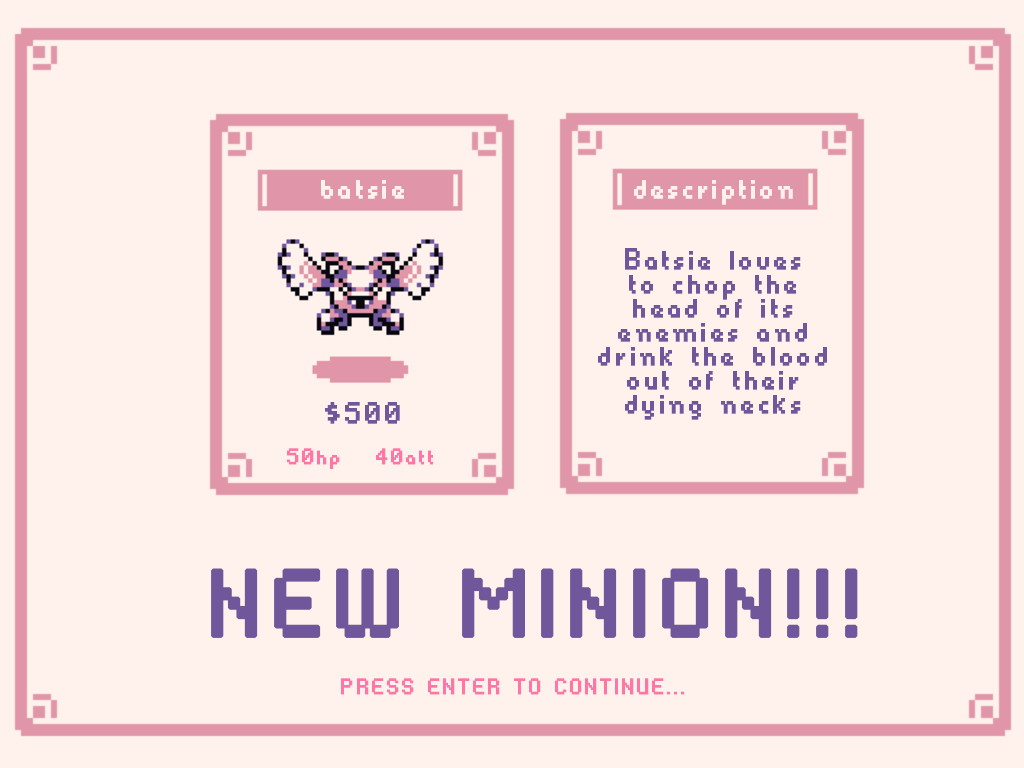
<style>
.page{position:relative;width:1024px;height:768px;background:#fff1eb}
.page>*{position:absolute;margin:0}
.t1{font:48px "HeartbitXX2Px";color:#fff1eb;font-weight:bold;scale:0.9 1}
.t2{font:48px/24px "HeartbitXX2Px";color:#70579c;font-weight:bold;scale:0.9 1}
.t3{font:48px "HeartbitXX2Px";color:#70579c;font-weight:bold;scale:0.9 1}
.t4{font:36px "HeartbitXX2Px";color:#ff76a6;font-weight:bold;scale:0.9 1}
.t5{font:150px "HeartbitXX2Px";color:#70579c;font-weight:bold;scale:0.9 1}
</style>
<div class="page">
<p class="t1" style="left:321px;top:180px;width:83px;height:19px">batsie</p>
<p class="t1" style="left:634px;top:180px;width:159px;height:25px">description</p>
<p class="t2" style="left:598px;top:248px;width:229px;height:172px;text-align:center">Batsie loves<br>to chop the<br>head of its<br>enemies and<br>drink the blood<br>out of their<br>dying necks</p>
<p class="t3" style="left:325px;top:402px;width:75px;height:22px">$500</p>
<p class="t4" style="left:287px;top:448px;width:146px;height:21px">50hp   40att</p>
<p class="t5" style="left:211px;top:568px;width:647px;height:70px">NEW MINION!!!</p>
<p class="t4" style="left:341px;top:678px;width:343px;height:17px">PRESS ENTER TO CONTINUE...</p>
</div>
